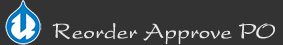
<style>
.page{position:relative;width:283px;height:45px;background:#333333}
.page>*{position:absolute;margin:0}
.t1{font:30px "DSNFreeHand";color:#e5e5e3}
</style>
<div class="page">
<p class="t1" style="left:52px;top:23px;width:223px;height:22px">Reorder Approve PO</p>
</div>
